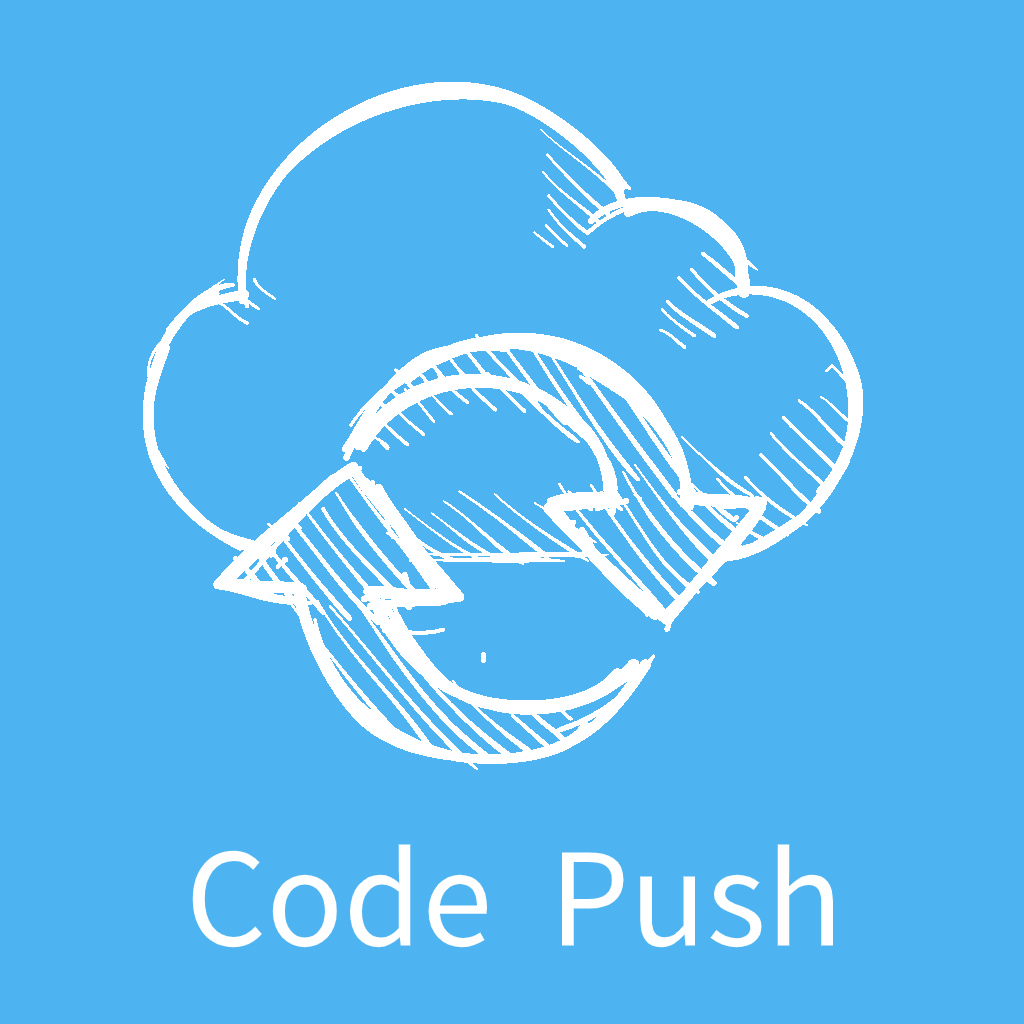
<style>
.page{position:relative;width:1024px;height:1024px;background:#4eb3f1}
.page>*{position:absolute;margin:0}
.t1{font:127px "SourceHanSansSC-Regular";color:#ffffff}
</style>
<div class="page">
<p class="t1" style="left:192px;top:844px;width:641px;height:104px">Code  Push</p>
</div>
